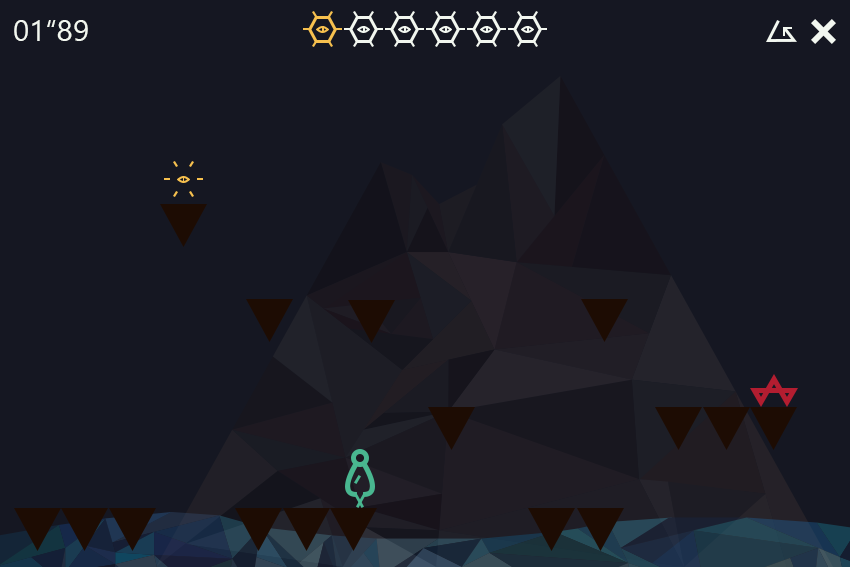
<style>
.page{position:relative;width:850px;height:567px;background:#151722}
.page>*{position:absolute;margin:0}
.t1{font:30px "Ebrima";color:#f2f7f0}
</style>
<div class="page">
<p class="t1" style="left:14px;top:20px;width:74px;height:21px">01“89</p>
</div>
